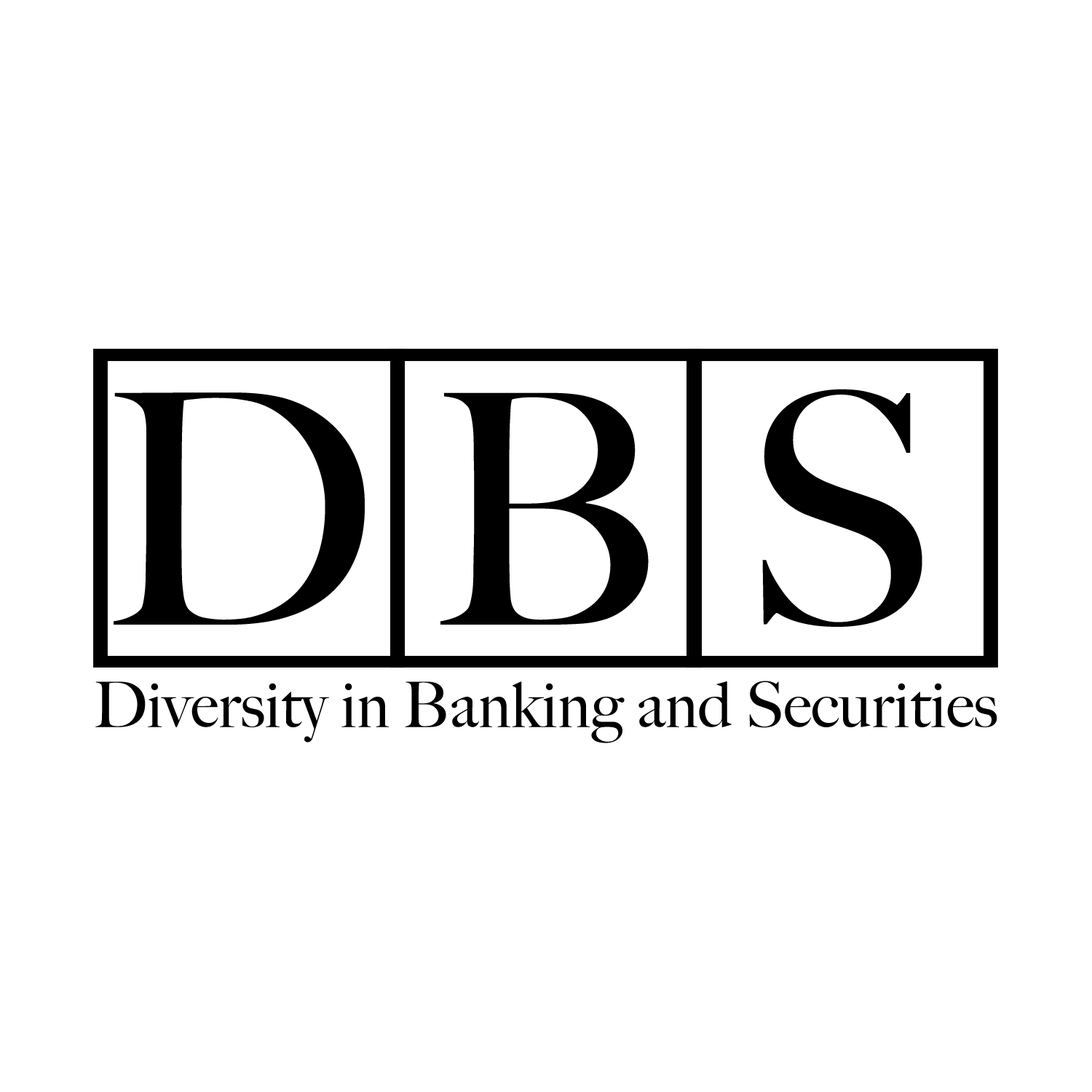
<style>
.page{position:relative;width:1092px;height:1092px;background:#ffffff}
.page>*{position:absolute;margin:0}
.t1{font:321.5px "BigCaslon-Medium";color:#000000}
.t2{font:63px "BigCaslon-Medium";color:#000000}
</style>
<div class="page">
<p class="t1" style="left:762px;top:389px;width:160px;height:238px">S</p>
<p class="t1" style="left:114px;top:392px;width:251px;height:233px">D</p>
<p class="t1" style="left:440px;top:392px;width:209px;height:233px">B</p>
<p class="t2" style="left:95px;top:681px;width:902px;height:62px">Diversity in Banking and Securities</p>
</div>
